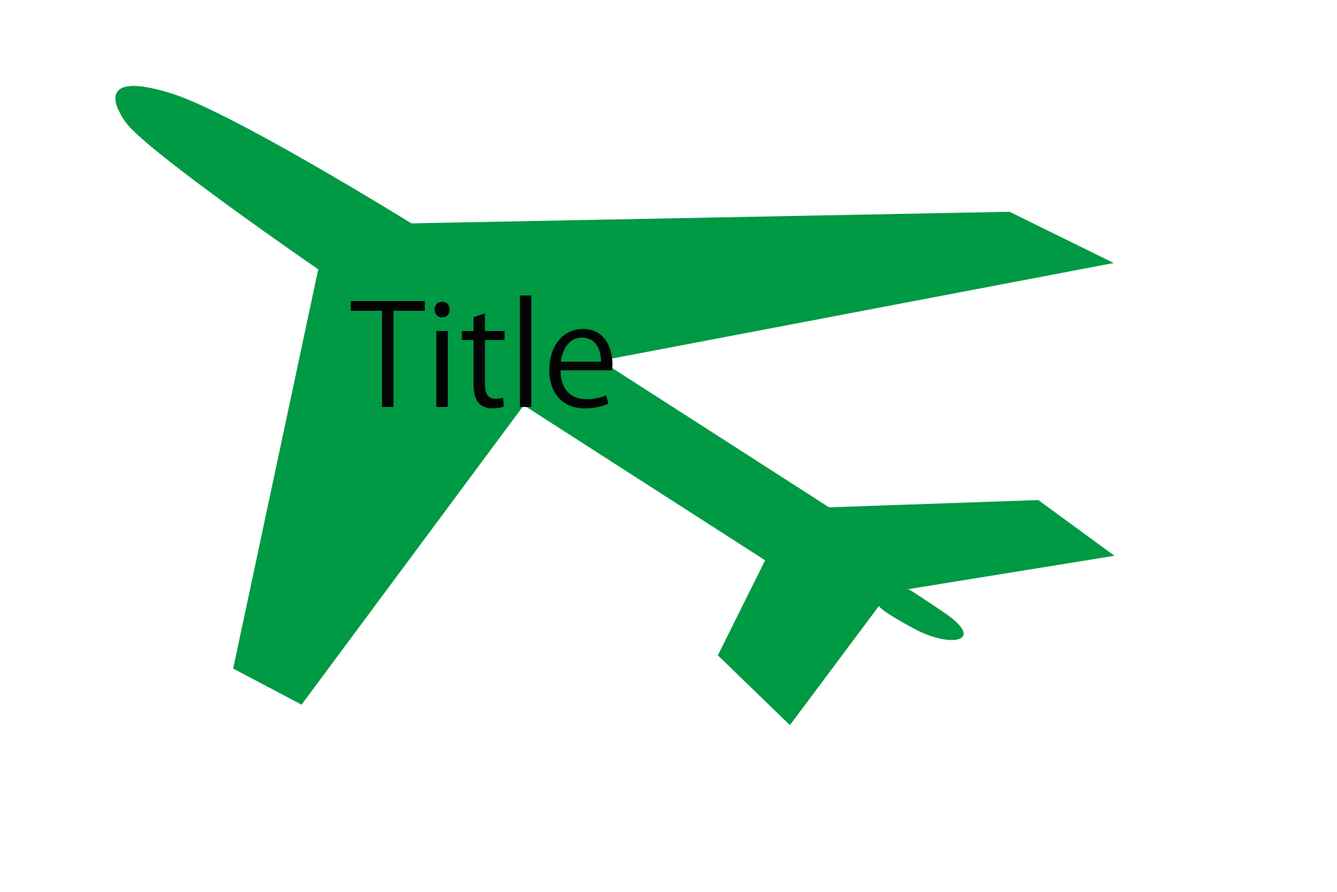
<style>
.page{position:relative;width:1337px;height:892px;background:#ffffff}
.page>*{position:absolute;margin:0}
.t1{font:139.3px "KozGoPr6N-Regular";color:#040404}
</style>
<div class="page">
<p class="t1" style="left:350px;top:295px;width:263px;height:113px">Title</p>
</div>
